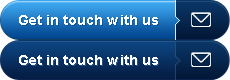
<style>
.page{position:relative;width:230px;height:80px}
.page>*{position:absolute;margin:0}
.t1{font:14px "Arial-BoldMT";color:#ffffff}
</style>
<div class="page">
<p class="t1" style="left:19px;top:15px;width:139px;height:10px">Get in touch with us</p>
<p class="t1" style="left:19px;top:55px;width:139px;height:10px">Get in touch with us</p>
</div>
